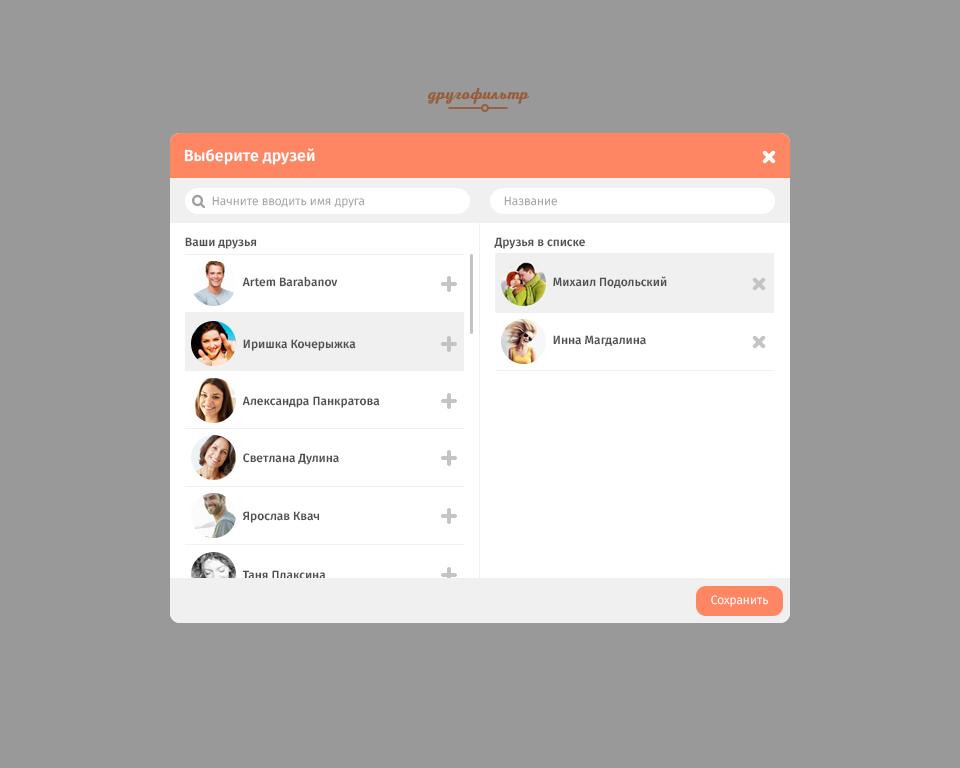
<style>
.page{position:relative;width:960px;height:768px;background:#999999}
.page>*{position:absolute;margin:0}
.t1{font:16px "FiraSans-Medium";color:#ffffff}
.t2{font:12px "FiraSans-Light";color:#9f9f9f}
.t3{font:12px "FiraSans-Medium";color:#4f4f4f}
.t4{font:12px "FiraSans-Light";color:#ffffff}
</style>
<div class="page">
<p class="t1" style="left:184px;top:148px;width:131px;height:17px">Выберите друзей</p>
<p class="t2" style="left:212px;top:196px;width:153px;height:12px">Начните вводить имя друга</p>
<p class="t2" style="left:504px;top:196px;width:53px;height:10px">Название</p>
<p class="t3" style="left:185px;top:237px;width:72px;height:12px">Ваши друзья</p>
<p class="t3" style="left:494px;top:237px;width:91px;height:12px">Друзья в списке</p>
<p class="t3" style="left:242px;top:276px;width:96px;height:11px">Artem Barabanov</p>
<p class="t3" style="left:553px;top:276px;width:114px;height:13px">Михаил Подольский</p>
<p class="t3" style="left:243px;top:339px;width:113px;height:12px">Иришка Кочерыжка</p>
<p class="t3" style="left:553px;top:335px;width:93px;height:11px">Инна Магдалина</p>
<p class="t3" style="left:242px;top:396px;width:138px;height:12px">Александра Панкратова</p>
<p class="t3" style="left:243px;top:453px;width:96px;height:12px">Светлана Дулина</p>
<p class="t3" style="left:243px;top:511px;width:77px;height:12px">Ярослав Квач</p>
<p class="t3" style="left:242px;top:570px;width:84px;height:10px">Таня Плаксина</p>
<p class="t4" style="left:711px;top:595px;width:57px;height:12px">Сохранить</p>
</div>
